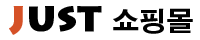
<style>
.page{position:relative;width:200px;height:40px;background:#ffffff}
.page>*{position:absolute;margin:0}
.t1{font:34.1px "LithosPro-Black";color:#000000;font-weight:bold}
.t2{font:34.1px "LithosPro-Black";color:#d55127;font-weight:bold}
.t3{font:26.6px "AdobeGothicStd-Bold";color:#000000}
</style>
<div class="page">
<p class="t1" style="left:9px;top:6px;width:184px;height:29px"><span class="t2">J</span>UST <span class="t3">쇼핑몰</span></p>
</div>
